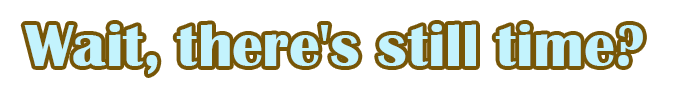
<style>
.page{position:relative;width:685px;height:94px;background:#ffffff}
.page>*{position:absolute;margin:0}
.t1{font:62.2px "BritannicBold";color:#c3f3fd}
</style>
<div class="page">
<p class="t1" style="left:24px;top:24px;width:619px;height:50px">Wait, there's still time?</p>
</div>
